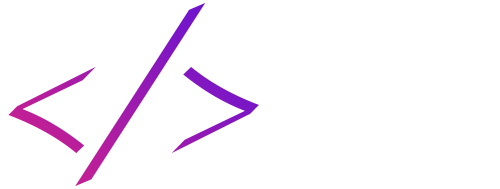
<style>
.page{position:relative;width:500px;height:189px;background:#ffffff}
.page>*{position:absolute;margin:0}
.t1{font:167.2px "Apple-Chancery"}
</style>
<div class="page">
<p class="t1" style="left:8px;top:3px;width:251px;height:183px">&lt;/&gt;</p>
</div>
